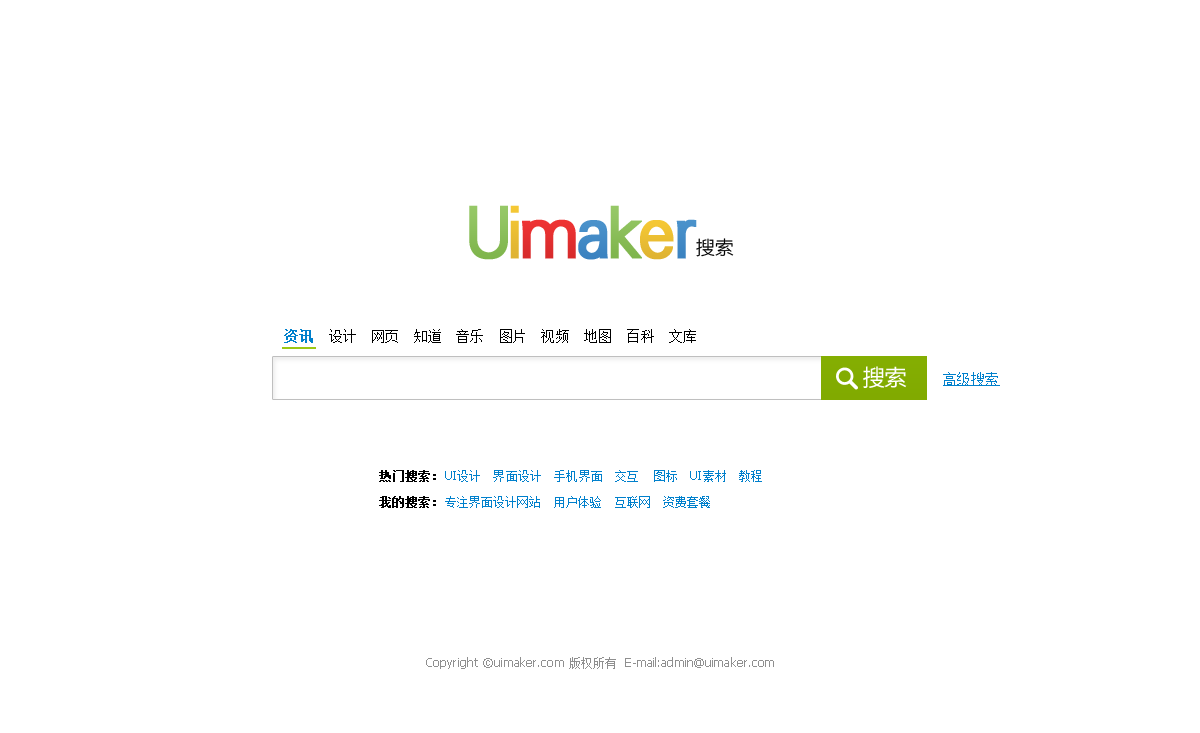
<style>
.page{position:relative;width:1200px;height:733px;background:#ffffff}
.page>*{position:absolute;margin:0}
.t1{font:67.7px "Tianshi-HeiOld";letter-spacing:-0.05em;color:#8abe59;font-weight:bold}
.t2{font:67.7px "Tianshi-HeiOld";letter-spacing:-0.05em;color:#e8bb33;font-weight:bold}
.t3{font:67.7px "Tianshi-HeiOld";letter-spacing:-0.05em;color:#89bd58;font-weight:bold}
.t4{font:67.7px "Tianshi-HeiOld";letter-spacing:-0.05em;color:#e53030;font-weight:bold}
.t5{font:67.7px "Tianshi-HeiOld";letter-spacing:-0.05em;color:#428ac5;font-weight:bold}
.t6{font:67.7px "Tianshi-HeiOld";letter-spacing:-0.05em;color:#ebbf33;font-weight:bold}
.t7{font:67.7px "Tianshi-HeiOld";letter-spacing:-0.05em;color:#468dc8;font-weight:bold}
.t8{font:18.7px "FZLTXHFW--GB1-0";letter-spacing:0.01em;color:#000000}
.t9{font:14px "SimSun";letter-spacing:0.01em;color:#000000}
.t10{font:14px "SimSun";letter-spacing:0.01em;color:#0080cc;font-weight:bold}
.t11{font:22px "MicrosoftYaHei";letter-spacing:-0.025em;color:#ffffff}
.t12{font:14px "SimSun";letter-spacing:0.01em;color:#0080cc;text-decoration:underline}
.t13{font:12px "SimSun";letter-spacing:0.01em;color:#0080cc}
.t14{font:12px "SimSun";letter-spacing:0.01em;color:#000000;font-weight:bold}
.t15{font:12px "Tahoma";letter-spacing:0.01em;color:#0080cc}
.t16{font:12px "Tahoma";letter-spacing:0.01em;color:#8f8f8f}
.t17{font:12px "SimSun";letter-spacing:0.01em;color:#8f8f8f}
</style>
<div class="page">
<p class="t1" style="left:469px;top:205px;width:39px;height:55px">U</p>
<p class="t2" style="left:510px;top:205px;width:9px;height:54px">i</p>
<p class="t3" style="left:610px;top:205px;width:32px;height:54px">k</p>
<p class="t4" style="left:522px;top:219px;width:54px;height:40px">m</p>
<p class="t5" style="left:578px;top:220px;width:30px;height:40px">a</p>
<p class="t6" style="left:640px;top:220px;width:34px;height:40px">e</p>
<p class="t7" style="left:676px;top:219px;width:21px;height:40px">r</p>
<p class="t8" style="left:696px;top:238px;width:38px;height:19px">搜索</p>
<p class="t9" style="left:284px;top:329px;width:412px;height:14px"><span class="t10">资讯  </span>设计  网页  知道  音乐  图片  视频  地图  百科  文库</p>
<p class="t11" style="left:863px;top:366px;width:44px;height:22px">搜索</p>
<p class="t12" style="left:943px;top:372px;width:57px;height:14px">高级搜索</p>
<p class="t13" style="left:379px;top:470px;width:383px;height:12px"><span class="t14">热门搜索：</span><span class="t15">UI</span>设计   界面设计   手机界面   交互   图标<span class="t15">   UI</span>素材   教程</p>
<p class="t13" style="left:379px;top:496px;width:331px;height:12px"><span class="t14">我的搜索：</span>专注界面设计网站  用户体验  互联网  资费套餐</p>
<p class="t16" style="left:426px;top:657px;width:348px;height:12px">Copyright ©uimaker.com <span class="t17">版权所有</span>  E-mail:admin@uimaker.com</p>
</div>
